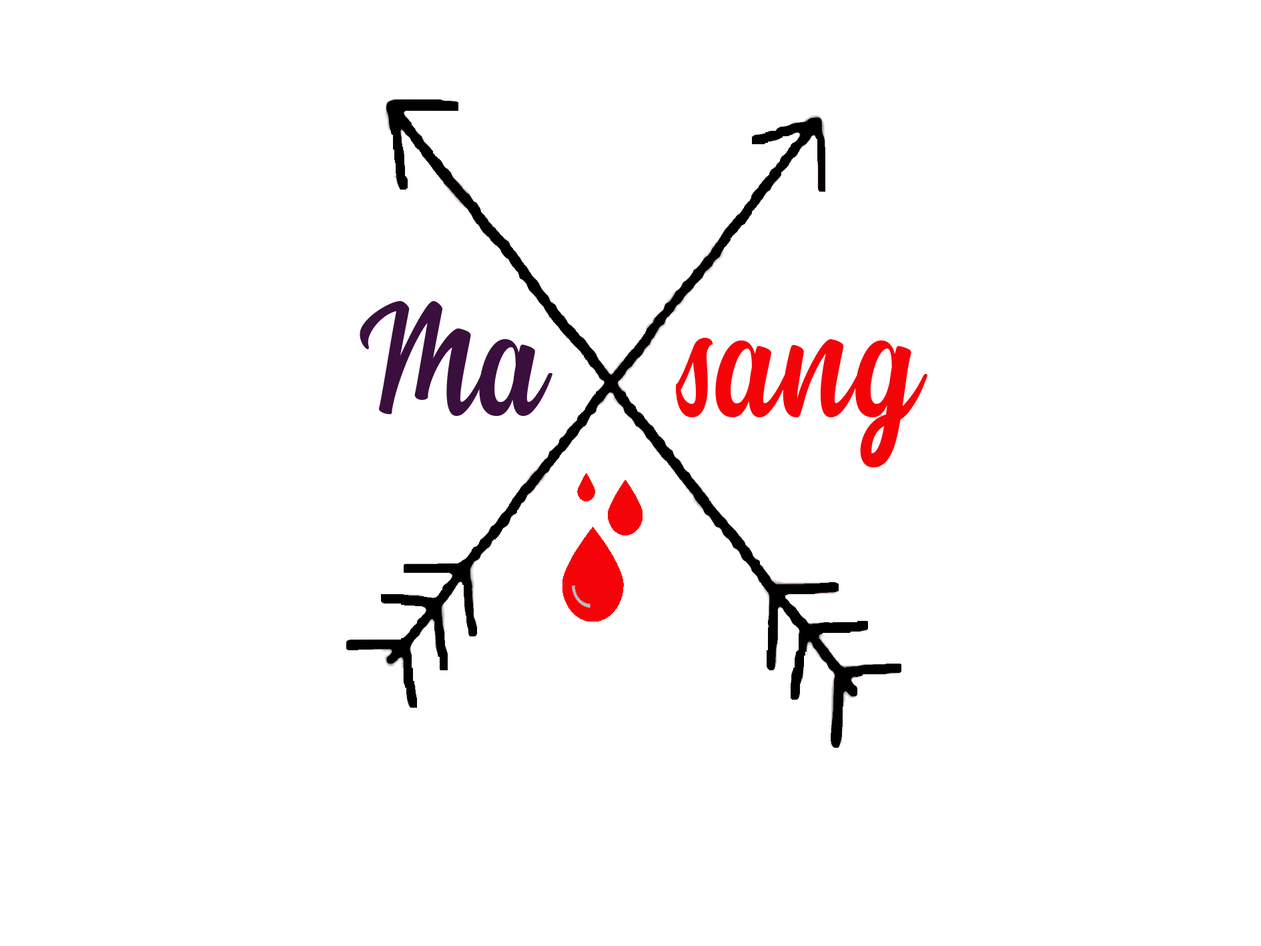
<style>
.page{position:relative;width:1261px;height:946px;background:#ffffff}
.page>*{position:absolute;margin:0}
.t1{font:155.7px "SummerFruitsPersonalUse-Reg";color:#3a0f3d}
.t2{font:155.7px "SummerFruitsPersonalUse-Reg";color:#f40309}
</style>
<div class="page">
<p class="t1" style="left:360px;top:301px;width:192px;height:115px">Ma</p>
<p class="t2" style="left:676px;top:337px;width:252px;height:130px">sang</p>
</div>
